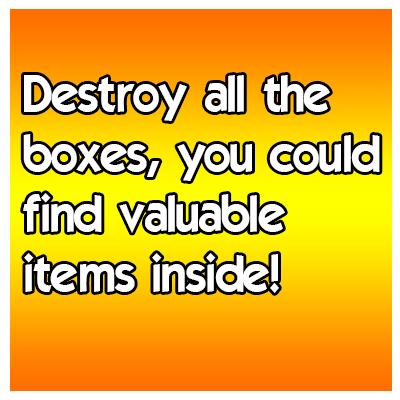
<style>
.page{position:relative;width:400px;height:400px}
.page>*{position:absolute;margin:0}
.t1{font:50px "ELEGANCE";color:#ffffff}
</style>
<div class="page">
<p class="t1" style="left:23px;top:75px;width:357px;height:218px">Destroy all the<br>boxes, you could<br>find valuable<br>items inside!</p>
</div>
